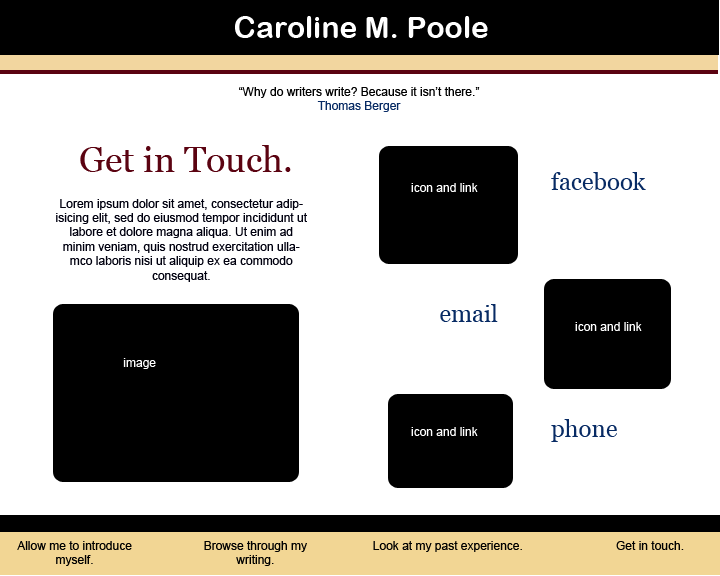
<style>
.page{position:relative;width:720px;height:576px;background:#ffffff}
.page>*{position:absolute;margin:0}
.t1{font:30px "ArialRoundedMTBold";color:#ffffff}
.t2{font:12px "ArialMT";color:#000000}
.t3{font:12px "ArialMT";color:#082b64}
.t4{font:36px "Georgia";color:#5b0311}
.t5{font:24px "Georgia";color:#082b64}
.t6{font:12px "ArialMT";color:#ffffff}
.t7{font:12px "ArialMT";color:#00000f}
</style>
<div class="page">
<p class="t1" style="left:235px;top:16px;width:253px;height:22px">Caroline M. Poole</p>
<p class="t2" style="left:239px;top:87px;width:241px;height:25px;text-align:center">“Why do writers write? Because it isn’t there.”<br><span class="t3">Thomas Berger</span></p>
<p class="t4" style="left:80px;top:145px;width:211px;height:27px">Get in Touch.</p>
<p class="t5" style="left:551px;top:172px;width:95px;height:18px">facebook</p>
<p class="t6" style="left:411px;top:183px;width:67px;height:9px">icon and link</p>
<p class="t7" style="left:56px;top:199px;width:251px;height:83px;text-align:center">Lorem ipsum dolor sit amet, consectetur adipisicing elit, sed do eiusmod tempor incididunt ut labore et dolore magna aliqua. Ut enim ad minim veniam, quis nostrud exercitation ullamco laboris nisi ut aliquip ex ea commodo consequat.</p>
<p class="t5" style="left:440px;top:304px;width:58px;height:18px">email</p>
<p class="t6" style="left:575px;top:322px;width:67px;height:9px">icon and link</p>
<p class="t6" style="left:123px;top:358px;width:33px;height:11px">image</p>
<p class="t5" style="left:551px;top:419px;width:66px;height:23px">phone</p>
<p class="t6" style="left:411px;top:427px;width:67px;height:9px">icon and link</p>
<p class="t2" style="left:17px;top:541px;width:115px;height:25px;text-align:center">Allow me to introduce myself.</p>
<p class="t2" style="left:204px;top:541px;width:103px;height:25px;text-align:center">Browse through my writing.</p>
<p class="t2" style="left:373px;top:541px;width:149px;height:11px">Look at my past experience.</p>
<p class="t2" style="left:616px;top:541px;width:68px;height:9px">Get in touch.</p>
</div>
